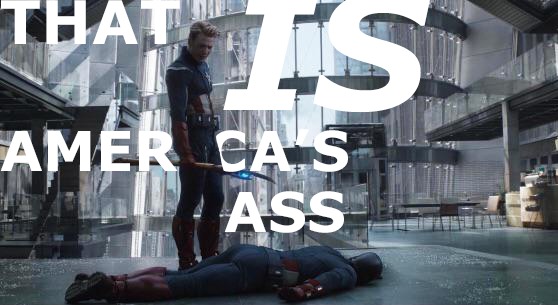
<style>
.page{position:relative;width:558px;height:305px}
.page>*{position:absolute;margin:0}
.t1{font:60px "Verdana-Bold";letter-spacing:0.01em;color:#ffffff}
.t2{font:55px "Verdana-Bold";letter-spacing:0.01em;color:#ffffff}
</style>
<div class="page">
<p class="t1" style="left:1px;top:0px;width:179px;height:44px">THAT</p>
<p class="t2" style="left:0px;top:129px;width:348px;height:43px">AMERICA’S</p>
<p class="t2" style="left:224px;top:191px;width:120px;height:42px">ASS</p>
</div>
